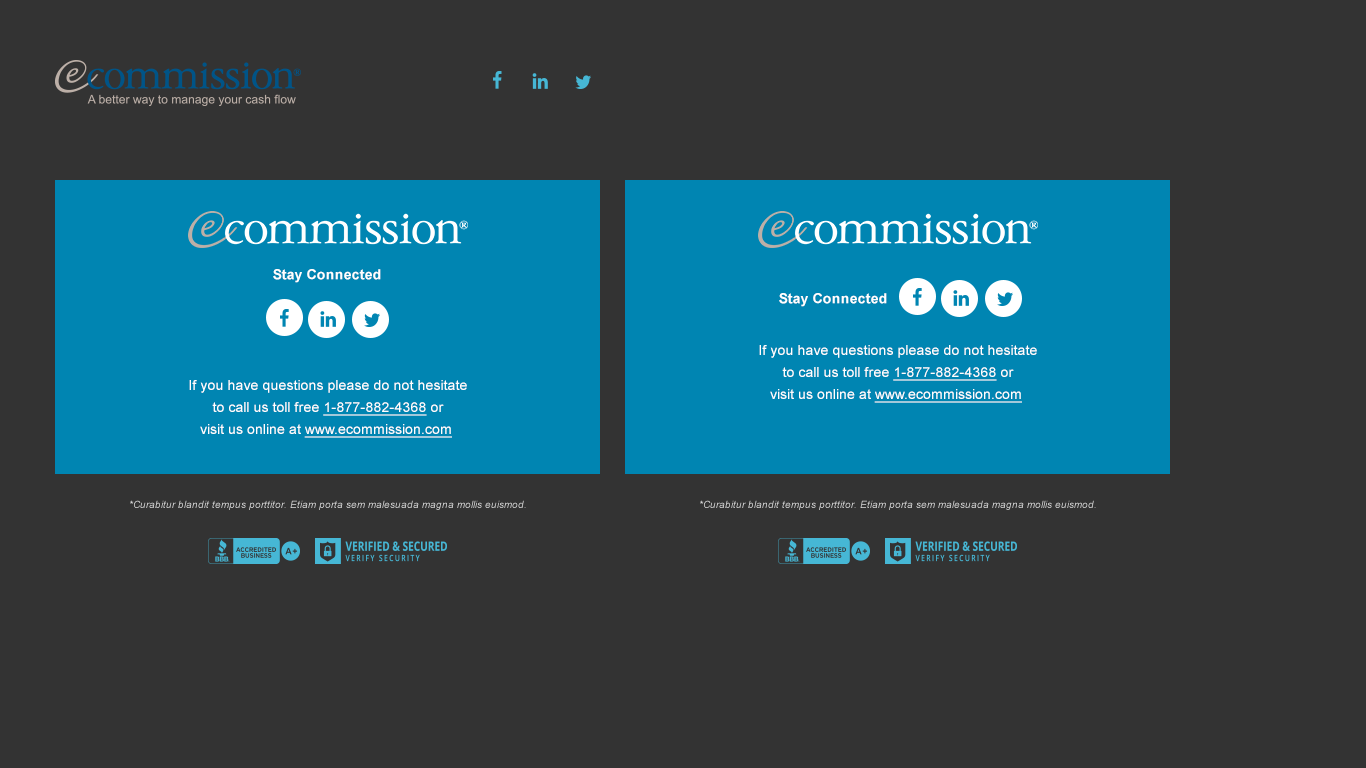
<style>
.page{position:relative;width:1366px;height:768px;background:#333333}
.page>*{position:absolute;margin:0}
.t1{font:14px "Arial-BoldMT";color:#ffffff}
.t2{font:14px/22px "ArialMT";color:#ffffff}
.t3{font:14px/22px "ArialMT";color:#ffffff;text-decoration:underline}
.t4{font:10px "Arial-ItalicMT";color:#dddddd}
</style>
<div class="page">
<p class="t1" style="left:273px;top:269px;width:108px;height:14px">Stay Connected</p>
<p class="t1" style="left:779px;top:293px;width:108px;height:14px">Stay Connected</p>
<p class="t2" style="left:759px;top:345px;width:278px;height:58px;text-align:center">If you have questions please do not hesitate<br>to call us toll free <span class="t3">1-877-882-4368</span> or<br>visit us online at <span class="t3">www.ecommission.com</span></p>
<p class="t2" style="left:189px;top:380px;width:278px;height:58px;text-align:center">If you have questions please do not hesitate<br>to call us toll free <span class="t3">1-877-882-4368</span> or<br>visit us online at <span class="t3">www.ecommission.com</span></p>
<p class="t4" style="left:130px;top:500px;width:396px;height:10px">*Curabitur blandit tempus porttitor. Etiam porta sem malesuada magna mollis euismod.</p>
<p class="t4" style="left:700px;top:500px;width:396px;height:10px">*Curabitur blandit tempus porttitor. Etiam porta sem malesuada magna mollis euismod.</p>
</div>
